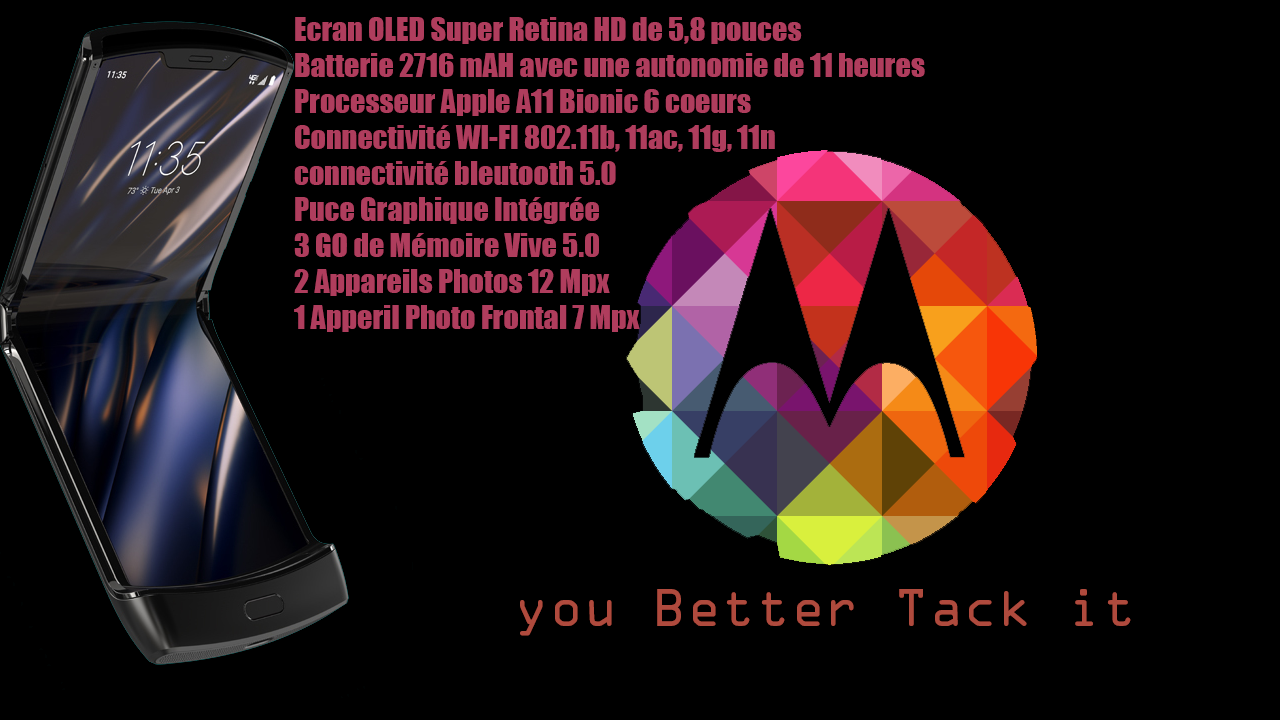
<style>
.page{position:relative;width:1280px;height:720px;background:#000000}
.page>*{position:absolute;margin:0}
.t1{font:30px "Impact";color:#af3d5d}
.t2{font:48px "OCRAStd";color:#af4a3d}
</style>
<div class="page">
<p class="t1" style="left:294px;top:17px;width:631px;height:315px">Ecran OLED Super Retina HD de 5,8 pouces<br>Batterie 2716 mAH avec une autonomie de 11 heures<br>Processeur Apple A11 Bionic 6 coeurs<br>Connectivité WI-FI 802.11b, 11ac, 11g, 11n<br>connectivité bleutooth 5.0<br>Puce Graphique Intégrée<br>3 GO de Mémoire Vive 5.0<br>2 Appareils Photos 12 Mpx<br>1 Apperil Photo Frontal 7 Mpx</p>
<p class="t2" style="left:520px;top:589px;width:611px;height:47px">you Better Tack it</p>
</div>
